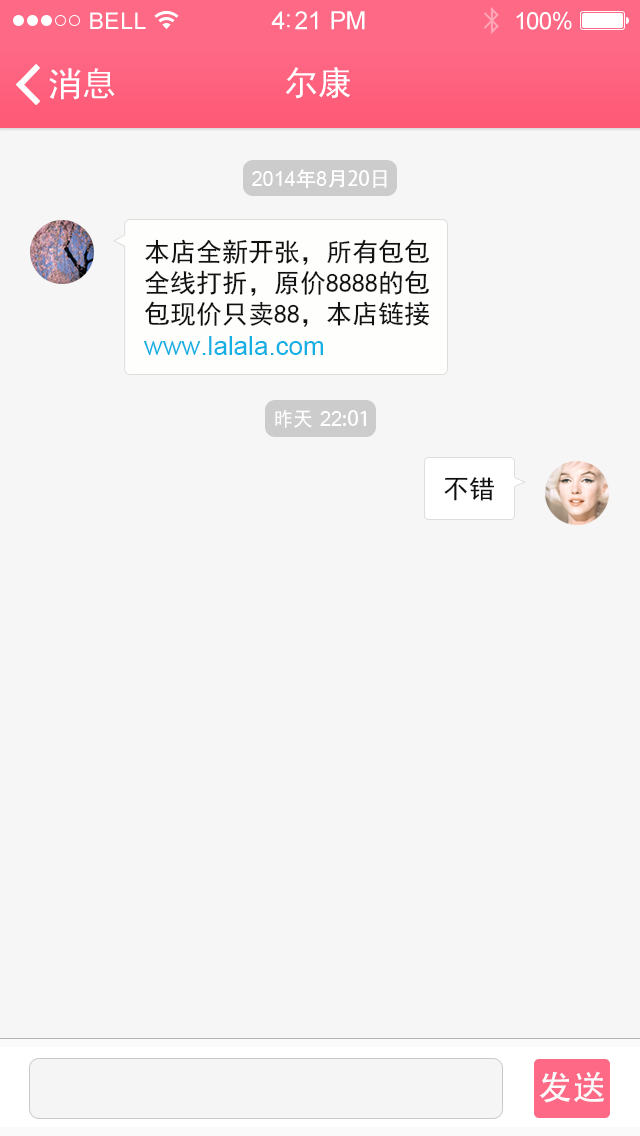
<style>
.page{position:relative;width:640px;height:1136px;background:#f6f6f6}
.page>*{position:absolute;margin:0}
.t1{font:20px "ArialMT";color:#ffffff}
.t2{font:20px "AdobeHeitiStd-Regular";color:#ffffff}
.t3{font:20px "SimHei";color:#ffffff}
.t4{font:26px "SimHei";color:#111111}
.t5{font:26px "ArialMT";color:#14b0e3}
.t6{font:20px "SimHei";color:#ffffff;scale:0.97 1}
.t7{font:34px "AdobeHeitiStd-Regular";color:#fafafa}
</style>
<div class="page">
<p class="t1" style="left:252px;top:169px;width:135px;height:19px">2014<span class="t2">年</span>8<span class="t2">月20</span><span class="t3">日</span></p>
<p class="t4" style="left:143px;top:239px;width:287px;height:116px">本店全新开张，所有包包<br>全线打折，原价8888的包<br>包现价只卖88，本店链接<br><span class="t5">www.lalala.com</span></p>
<p class="t6" style="left:275px;top:409px;width:37px;height:19px">昨天</p>
<p class="t2" style="left:320px;top:410px;width:46px;height:16px"><span class="t1">22</span>:01</p>
<p class="t4" style="left:444px;top:477px;width:51px;height:24px">不错</p>
<p class="t7" style="left:539px;top:1071px;width:66px;height:32px">发送</p>
</div>
